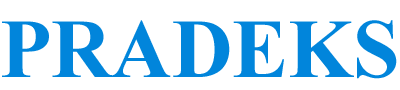
<style>
.page{position:relative;width:400px;height:90px;background:#ffffff}
.page>*{position:absolute;margin:0}
.t1{font:83.7px "TimesNewRomanPS-BoldMT";color:#0185db}
</style>
<div class="page">
<p class="t1" style="left:2px;top:20px;width:395px;height:59px">PRADEKS</p>
</div>
